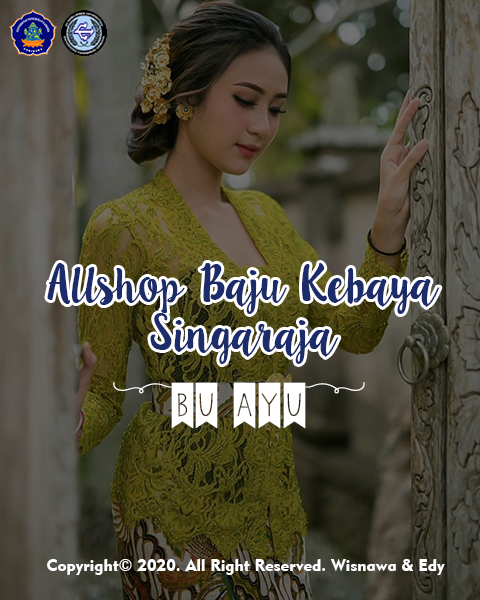
<style>
.page{position:relative;width:480px;height:600px}
.page>*{position:absolute;margin:0}
.t1{font:41.7px "LillyBelle";color:#1c2b69}
.t2{font:66.7px "KGALittleSwag";color:#ffffff}
.t3{font:16.7px "Geometric415BT-BlackA";color:#ffffff}
</style>
<div class="page">
<p class="t1" style="left:47px;top:263px;width:393px;height:101px;text-align:center">Allshop Baju Kebaya<br>Singaraja</p>
<p class="t2" style="left:113px;top:382px;width:252px;height:47px">(bu ayu)</p>
<p class="t3" style="left:47px;top:559px;width:398px;height:16px">Copyright© 2020. All Right Reserved. Wisnawa &amp; Edy</p>
</div>
